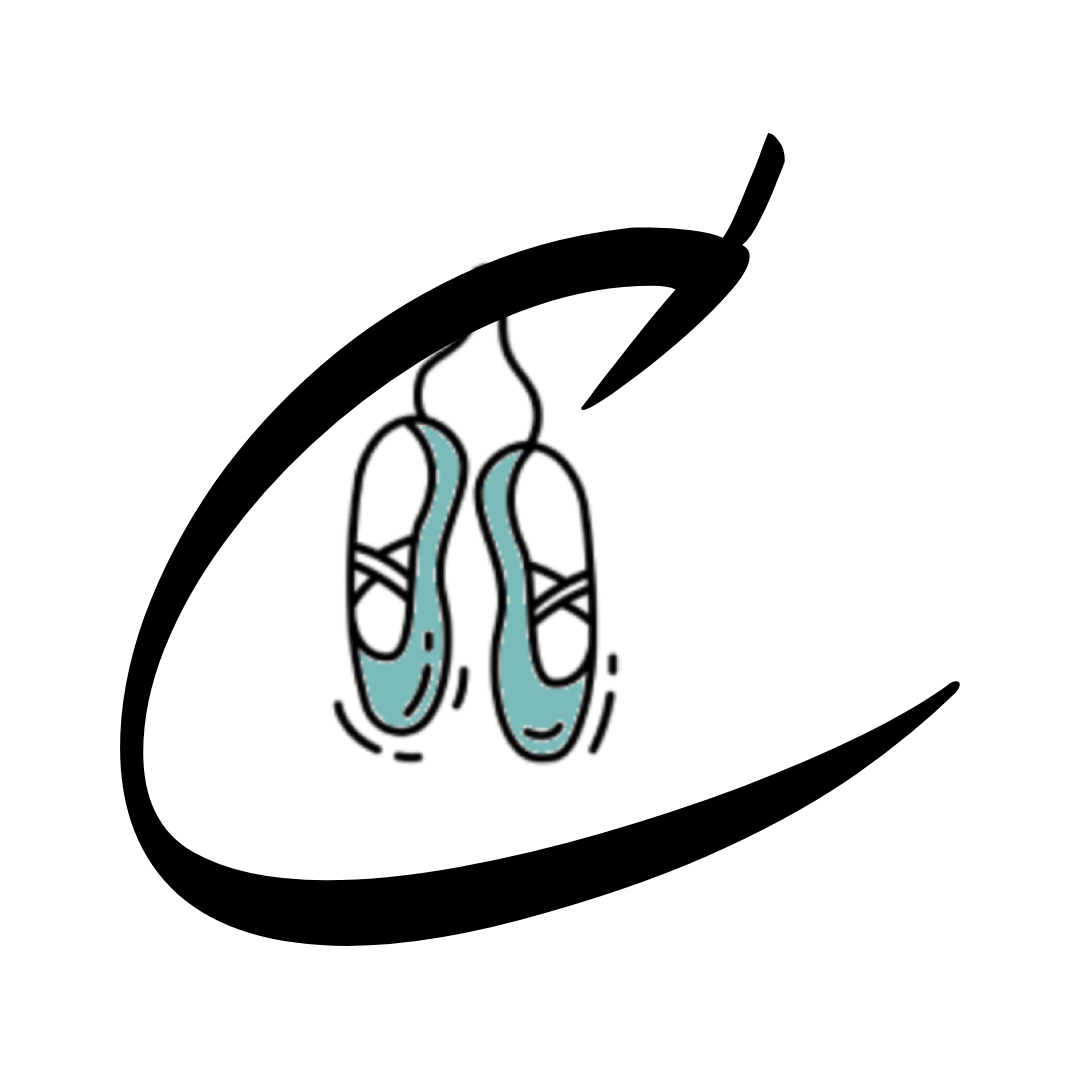
<style>
.page{position:relative;width:1080px;height:1080px;background:#ffffff}
.page>*{position:absolute;margin:0}
.t1{font:925.8px "Comforter-Regular";color:#000000}
</style>
<div class="page">
<p class="t1" style="left:120px;top:133px;width:840px;height:813px">C</p>
</div>
